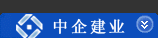
<style>
.page{position:relative;width:158px;height:38px;background:#0c4ebc}
.page>*{position:absolute;margin:0}
.t1{font:16px "SimSun";letter-spacing:0.15em;color:#ffffff;font-weight:bold}
</style>
<div class="page">
<p class="t1" style="left:53px;top:18px;width:72px;height:16px">中企建业</p>
</div>
